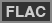
<style>
.page{position:relative;width:52px;height:23px;background:#333333}
.page>*{position:absolute;margin:0}
.t1{font:15.3px "Helvetica-Bold";color:#cccccc;text-transform:uppercase}
</style>
<div class="page">
<p class="t1" style="left:6px;top:6px;width:40px;height:11px">FLAC</p>
</div>
